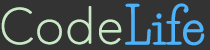
<style>
.page{position:relative;width:210px;height:50px;background:#333333}
.page>*{position:absolute;margin:0}
.t1{font:48px "AvenirNext-UltraLight";color:#cae9c7;font-weight:bold}
.t2{font:48px "LifeSavers";color:#4eb2f8;font-weight:bold}
</style>
<div class="page">
<p class="t1" style="left:1px;top:6px;width:121px;height:39px">Code</p>
<p class="t2" style="left:125px;top:3px;width:80px;height:43px">Life</p>
</div>
